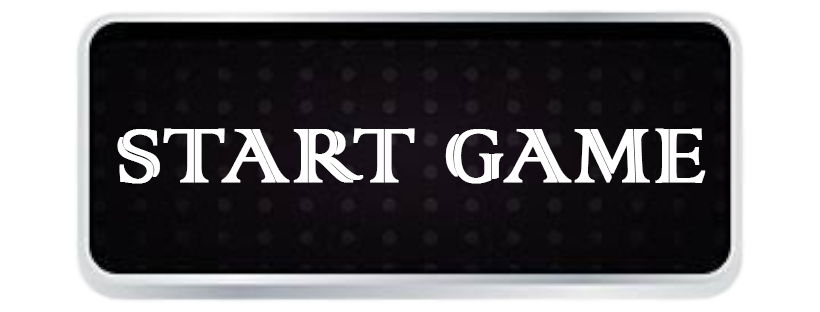
<style>
.page{position:relative;width:820px;height:312px;background:#ffffff}
.page>*{position:absolute;margin:0}
.t1{font:100px "ColonnaMT";color:#ffffff;font-weight:bold}
</style>
<div class="page">
<p class="t1" style="left:117px;top:128px;width:589px;height:56px">START GAME</p>
</div>
